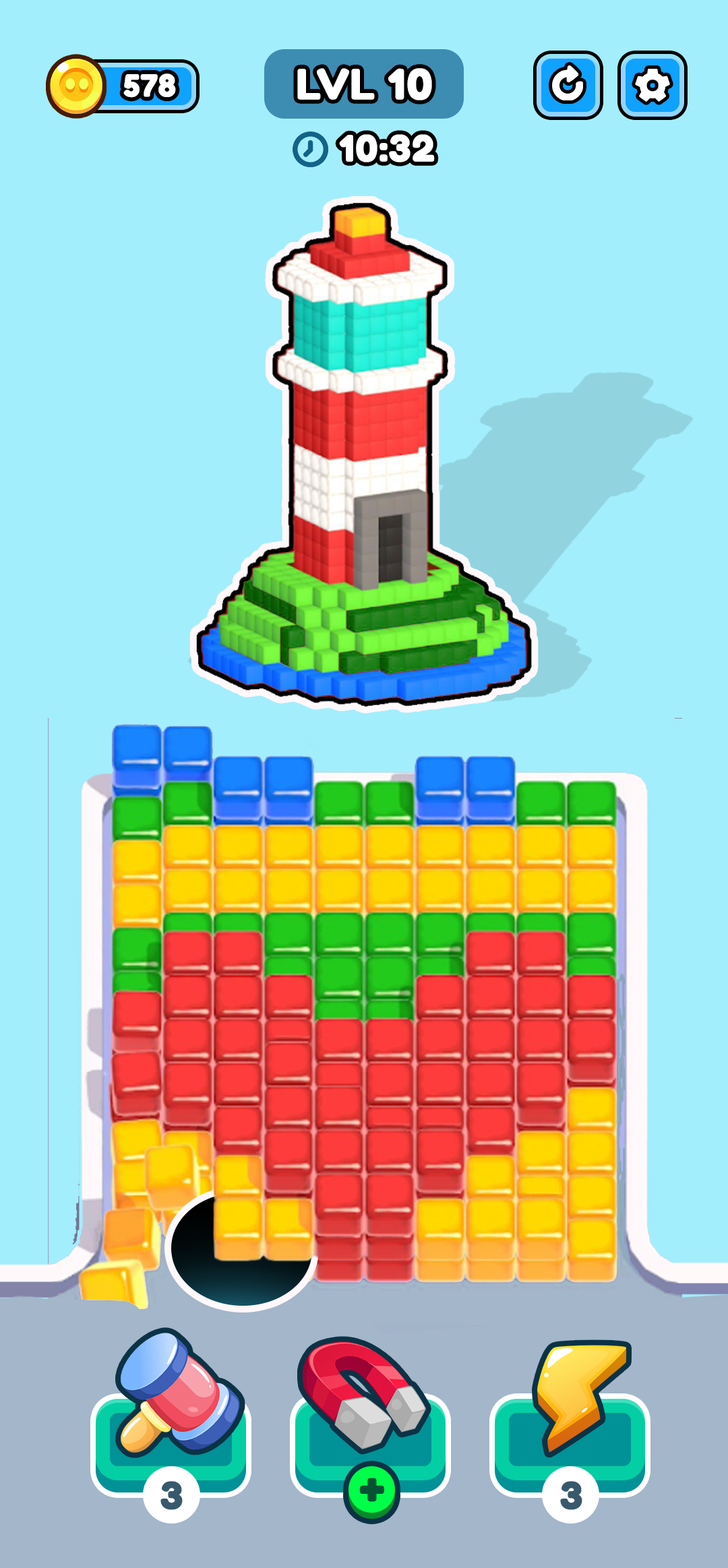
<style>
.page{position:relative;width:728px;height:1568px;background:#a3eefc}
.page>*{position:absolute;margin:0}
.t1{font:30.3px "FredokaOne-Regular";letter-spacing:0.01em;color:#ffffff;font-weight:bold}
.t2{font:41.4px "FredokaOne-Regular";letter-spacing:0.01em;color:#ffffff;font-weight:bold}
.t3{font:36px "FredokaOne-Regular";letter-spacing:0.01em;color:#ffffff;font-weight:bold}
.t4{font:37px "FredokaOne-Regular";letter-spacing:0.01em;color:#38596c;font-weight:bold}
.t5{font:48.2px "FredokaOne-Regular";letter-spacing:0.01em;color:#065333;font-weight:bold}
</style>
<div class="page">
<p class="t1" style="left:123px;top:73px;width:53px;height:25px">578</p>
<p class="t2" style="left:297px;top:68px;width:135px;height:32px">LVL 10</p>
<p class="t3" style="left:339px;top:134px;width:96px;height:28px">10:32</p>
<p class="t4" style="left:160px;top:1481px;width:23px;height:29px">3</p>
<p class="t5" style="left:359px;top:1478px;width:25px;height:24px">+</p>
<p class="t4" style="left:560px;top:1481px;width:22px;height:29px">3</p>
</div>
